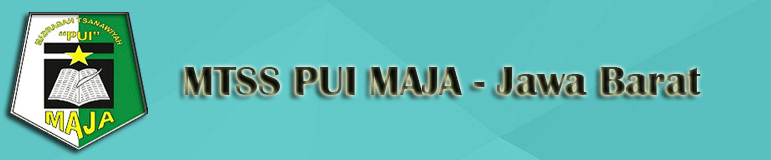
<style>
.page{position:relative;width:771px;height:160px}
.page>*{position:absolute;margin:0}
.t1{font:41.7px "BritannicBold"}
</style>
<div class="page">
<p class="t1" style="left:185px;top:67px;width:516px;height:28px">MTSS PUI MAJA - Jawa Barat</p>
</div>
